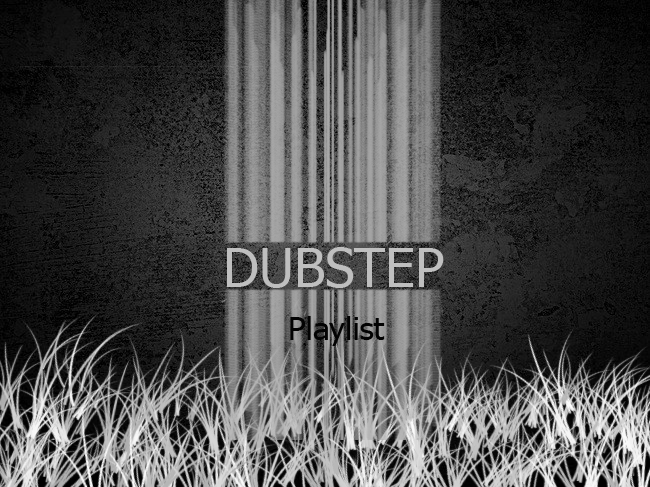
<style>
.page{position:relative;width:650px;height:487px}
.page>*{position:absolute;margin:0}
.t1{font:52.9px "Tahoma";color:#bfbfbf}
.t2{font:31.8px "Tahoma";color:#030303}
</style>
<div class="page">
<p class="t1" style="left:227px;top:247px;width:217px;height:41px">DUBSTEP</p>
<p class="t2" style="left:290px;top:316px;width:95px;height:30px">Playlist</p>
</div>
